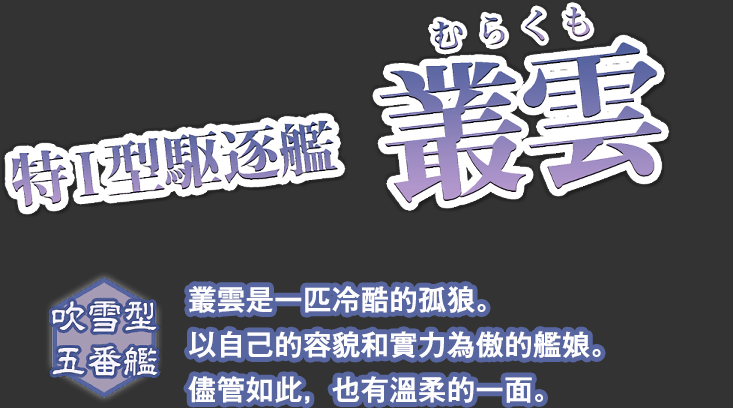
<style>
.page{position:relative;width:733px;height:408px;background:#333333}
.page>*{position:absolute;margin:0}
.t1{font:28px/45px "GothicMB101Pr6N-Medium";color:#fdfdfd;font-weight:bold}
</style>
<div class="page">
<p class="t1" style="left:188px;top:286px;width:413px;height:118px">叢雲是一匹冷酷的孤狼。<br>以自己的容貌和實力為傲的艦娘。<br>儘管如此，也有溫柔的一面。</p>
</div>
